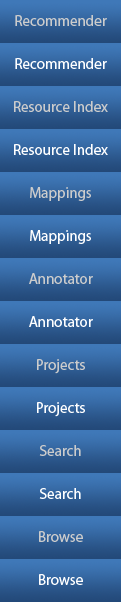
<style>
.page{position:relative;width:121px;height:602px}
.page>*{position:absolute;margin:0}
.t1{font:15px "MyriadPro-Regular";color:#cccccc}
.t2{font:15px "MyriadPro-Regular";color:#ffffff}
</style>
<div class="page">
<p class="t1" style="left:15px;top:15px;width:92px;height:11px">Recommender</p>
<p class="t2" style="left:15px;top:58px;width:92px;height:11px">Recommender</p>
<p class="t1" style="left:14px;top:101px;width:94px;height:11px">Resource Index</p>
<p class="t2" style="left:14px;top:144px;width:94px;height:11px">Resource Index</p>
<p class="t1" style="left:30px;top:187px;width:61px;height:14px">Mappings</p>
<p class="t2" style="left:30px;top:230px;width:61px;height:14px">Mappings</p>
<p class="t1" style="left:29px;top:273px;width:64px;height:11px">Annotator</p>
<p class="t2" style="left:29px;top:316px;width:64px;height:11px">Annotator</p>
<p class="t1" style="left:37px;top:359px;width:48px;height:15px">Projects</p>
<p class="t2" style="left:37px;top:402px;width:48px;height:15px">Projects</p>
<p class="t1" style="left:39px;top:445px;width:42px;height:11px">Search</p>
<p class="t2" style="left:39px;top:488px;width:42px;height:11px">Search</p>
<p class="t1" style="left:39px;top:531px;width:44px;height:11px">Browse</p>
<p class="t2" style="left:39px;top:574px;width:44px;height:11px">Browse</p>
</div>
